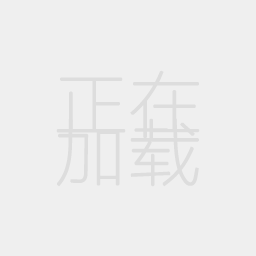
<style>
.page{position:relative;width:256px;height:256px;background:#efefef}
.page>*{position:absolute;margin:0}
.t1{font:72px/48px "FZLTCXHJW--GB1-0";color:#dddddd;font-weight:bold}
</style>
<div class="page">
<p class="t1" style="left:56px;top:70px;width:144px;height:117px">正在<br>加载</p>
</div>
